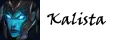
<style>
.page{position:relative;width:140px;height:40px;background:#ffffff}
.page>*{position:absolute;margin:0}
.t1{font:12px "VinerHandITC";color:#000000}
</style>
<div class="page">
<p class="t1" style="left:47px;top:12px;width:59px;height:14px">Kalista</p>
</div>
